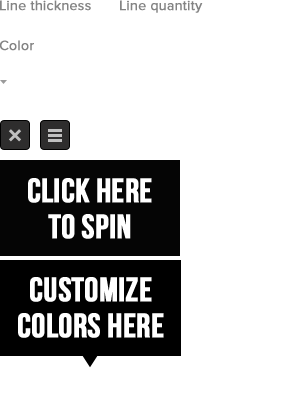
<style>
.page{position:relative;width:300px;height:400px;background:#ffffff}
.page>*{position:absolute;margin:0}
.t1{font:14px "ProximaNova-Regular";color:#838383;font-weight:bold}
.t2{font:34px/36px "BebasNeue";color:#ffffff;font-weight:bold}
</style>
<div class="page">
<p class="t1" style="left:0px;top:0px;width:91px;height:11px">Line thickness</p>
<p class="t1" style="left:120px;top:0px;width:83px;height:13px">Line quantity</p>
<p class="t1" style="left:0px;top:40px;width:34px;height:11px">Color</p>
<p class="t2" style="left:18px;top:277px;width:146px;height:61px;text-align:center;opacity:0.2">customize<br>colors here</p>
</div>
